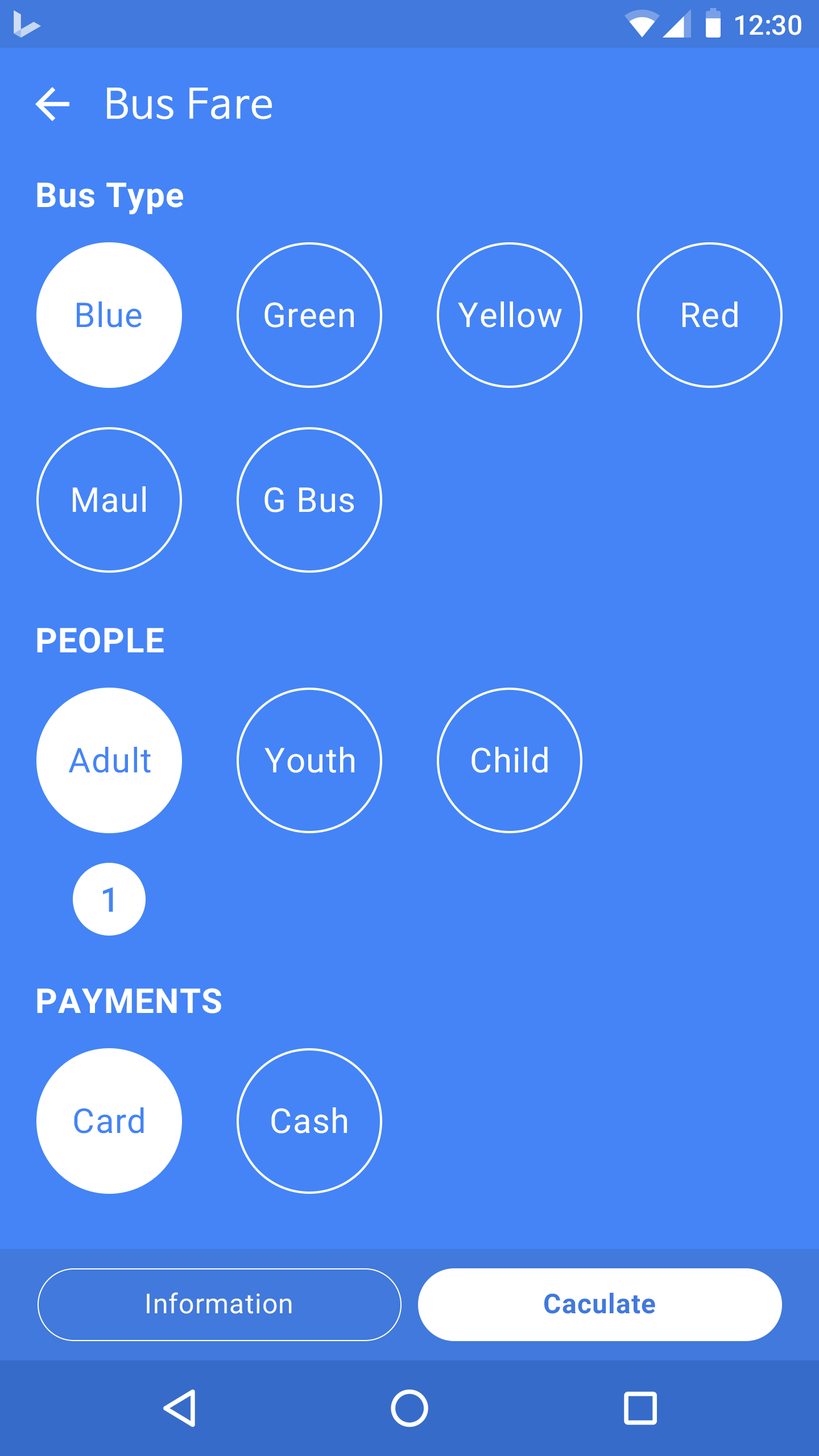
<style>
.page{position:relative;width:819px;height:1456px;background:#4484f6}
.page>*{position:absolute;margin:0}
.t1{font:27.3px "Roboto-Medium";color:#ffffff}
.t2{font:40.9px "NanumBarunGothic";letter-spacing:0.025em;color:#ffffff}
.t3{font:34.1px "Roboto-Bold";letter-spacing:0.025em;color:#ffffff}
.t4{font:34.1px "Roboto-Regular";letter-spacing:0.025em;color:#4484f6}
.t5{font:34.1px "Roboto-Regular";letter-spacing:0.025em;color:#ffffff}
.t6{font:34.1px "Roboto-Medium";letter-spacing:0.025em;color:#4484f6}
.t7{font:27.3px "Roboto-Regular";letter-spacing:0.025em;color:#fafafa}
.t8{font:27.3px "Roboto-Bold";letter-spacing:0.025em;color:#4179dc}
</style>
<div class="page">
<p class="t1" style="left:735px;top:15px;width:66px;height:20px">12:30</p>
<p class="t2" style="left:107px;top:88px;width:165px;height:31px">Bus Fare</p>
<p class="t3" style="left:37px;top:183px;width:146px;height:31px">Bus Type</p>
<p class="t4" style="left:77px;top:301px;width:65px;height:27px">Blue</p>
<p class="t5" style="left:264px;top:302px;width:90px;height:26px">Green</p>
<p class="t5" style="left:458px;top:301px;width:104px;height:27px">Yellow</p>
<p class="t5" style="left:682px;top:301px;width:56px;height:27px">Red</p>
<p class="t5" style="left:73px;top:486px;width:73px;height:26px">Maul</p>
<p class="t5" style="left:264px;top:487px;width:90px;height:25px">G Bus</p>
<p class="t3" style="left:37px;top:627px;width:127px;height:26px">PEOPLE</p>
<p class="t4" style="left:68px;top:747px;width:83px;height:26px">Adult</p>
<p class="t5" style="left:264px;top:747px;width:90px;height:26px">Youth</p>
<p class="t5" style="left:471px;top:747px;width:77px;height:26px">Child</p>
<p class="t6" style="left:103px;top:887px;width:10px;height:25px">1</p>
<p class="t3" style="left:37px;top:988px;width:184px;height:25px">PAYMENTS</p>
<p class="t4" style="left:74px;top:1107px;width:70px;height:27px">Card</p>
<p class="t5" style="left:271px;top:1107px;width:76px;height:27px">Cash</p>
<p class="t7" style="left:147px;top:1292px;width:145px;height:22px">Information</p>
<p class="t8" style="left:544px;top:1293px;width:111px;height:21px">Caculate</p>
</div>
